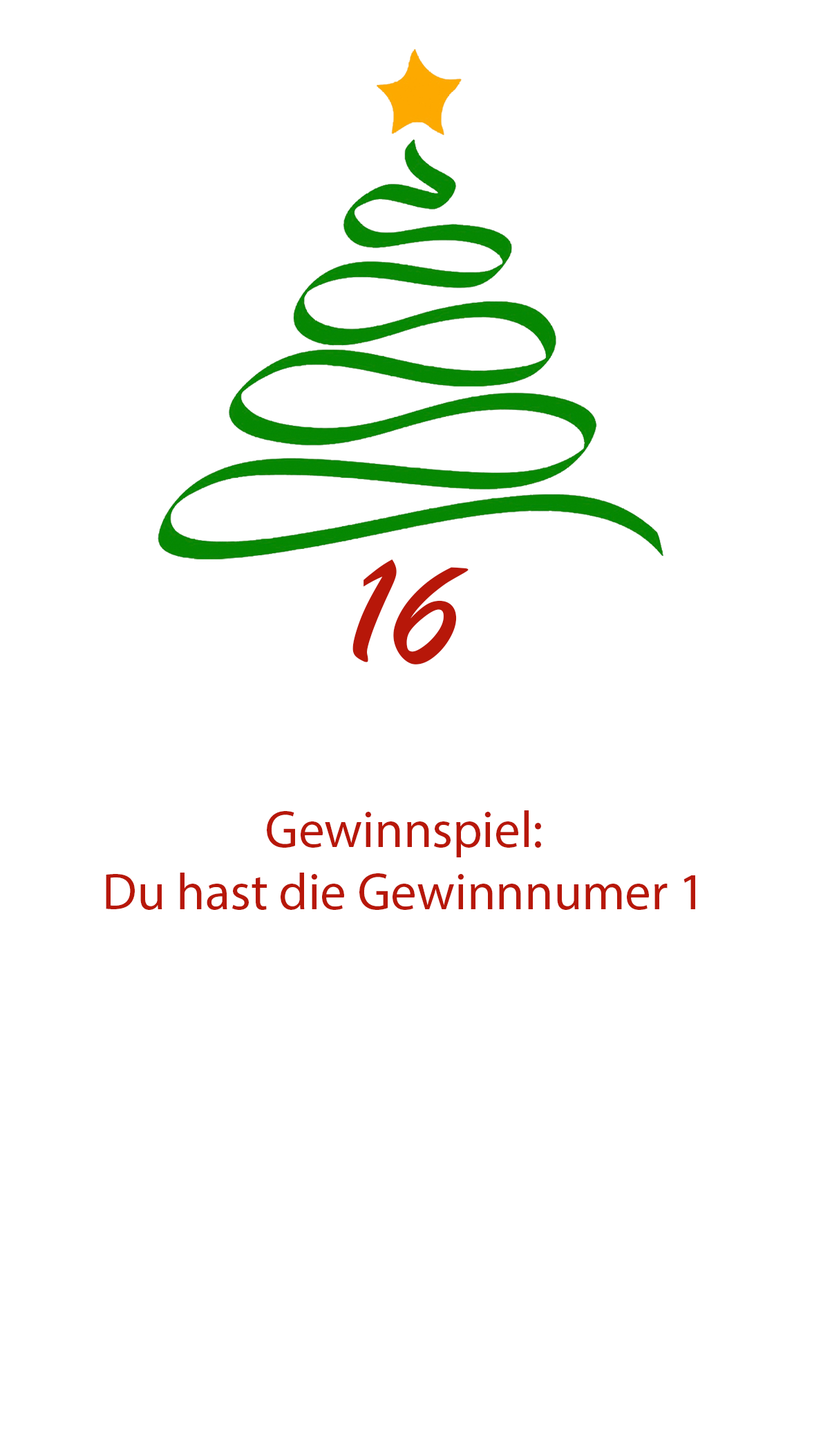
<style>
.page{position:relative;width:821px;height:1452px;background:#ffffff}
.page>*{position:absolute;margin:0}
.t1{font:162.8px "BrushScriptMT";color:#b71709}
.t2{font:51.9px "MyriadPro-Regular";color:#b71709}
</style>
<div class="page">
<p class="t1" style="left:353px;top:559px;width:116px;height:105px">16</p>
<p class="t2" style="left:106px;top:810px;width:589px;height:100px;text-align:center">Gewinnspiel:<br>Du hast die Gewinnnumer 1</p>
</div>
